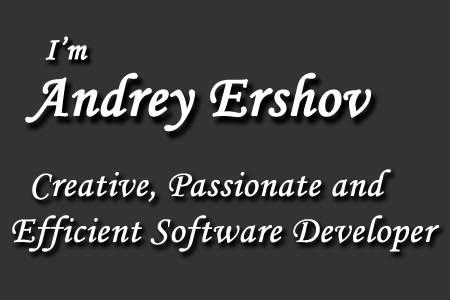
<style>
.page{position:relative;width:450px;height:300px;background:#333333}
.page>*{position:absolute;margin:0}
.t1{font:32px "MonotypeCorsiva";color:#ffffff;font-weight:bold}
.t2{font:60px "MonotypeCorsiva";color:#ffffff;font-weight:bold}
.t3{font:38px/46px "MonotypeCorsiva";color:#fffeff;font-weight:bold}
</style>
<div class="page">
<p class="t1" style="left:45px;top:36px;width:43px;height:24px">I’m</p>
<p class="t2" style="left:25px;top:72px;width:346px;height:60px">Andrey Ershov</p>
<p class="t3" style="left:12px;top:169px;width:428px;height:83px">Creative, Passionate and Efficient Software Developer</p>
</div>
